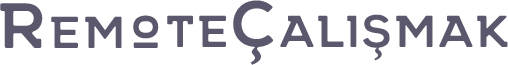
<style>
.page{position:relative;width:508px;height:65px;background:#ffffff}
.page>*{position:absolute;margin:0}
.t1{font:80px "NORTHWEST-Bold";letter-spacing:0.025em;color:#5b576c;font-variant:small-caps}
.t2{font:57px "NORTHWEST-Bold";letter-spacing:0.025em;color:#5b576c}
</style>
<div class="page">
<p class="t1" style="left:0px;top:3px;width:122px;height:45px">Rem</p>
<p class="t1" style="left:167px;top:0px;width:341px;height:48px">teCalismak</p>
<p class="t2" style="left:133px;top:15px;width:26px;height:33px">o</p>
</div>
